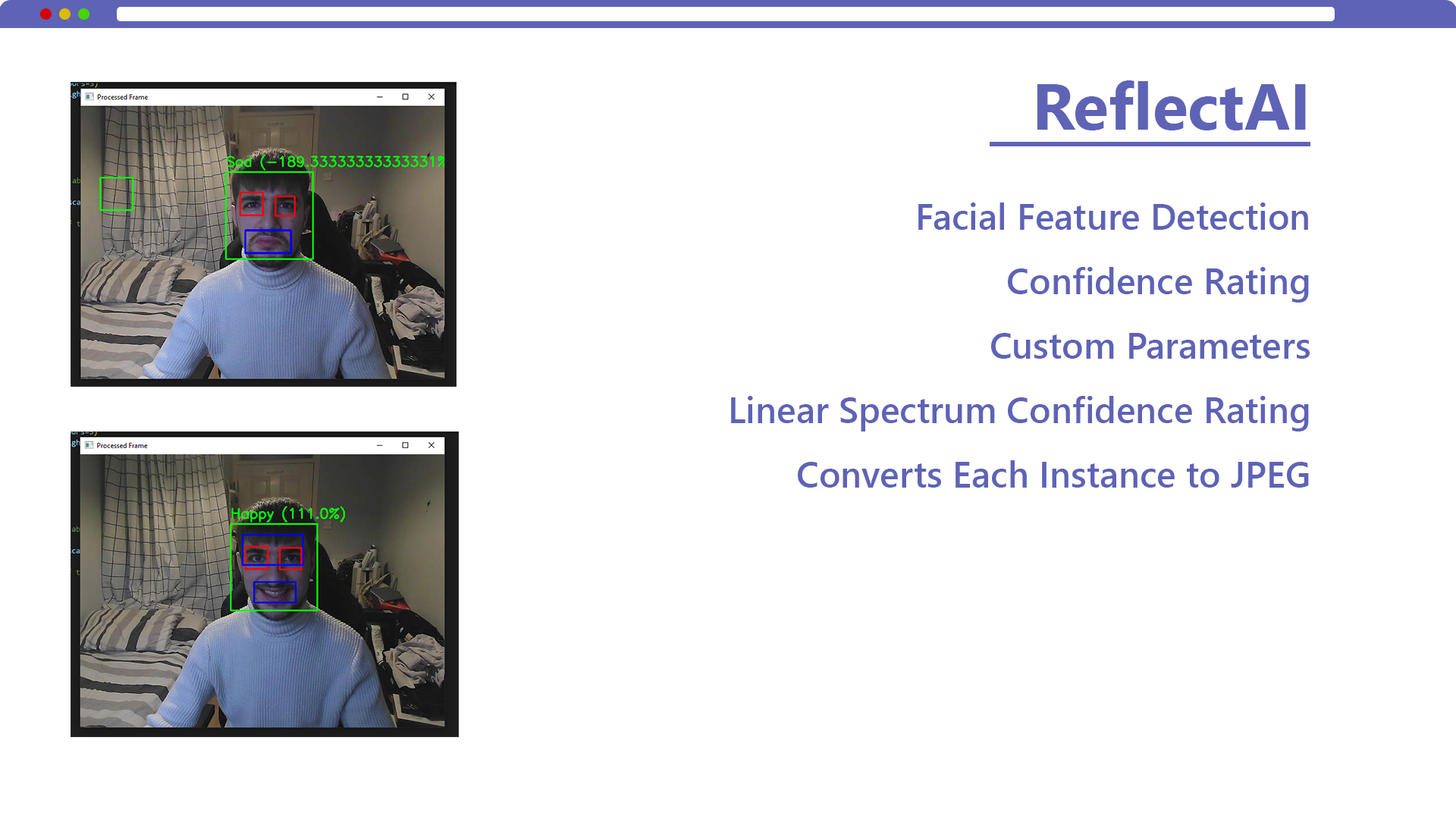
<style>
.page{position:relative;width:1456px;height:819px;background:#ffffff}
.page>*{position:absolute;margin:0}
.t1{font:65.2px "SegoeUI-Bold";color:#5e63b6}
.t2{font:36.4px/64.5px "SegoeUI-Semibold";color:#5e63b6}
</style>
<div class="page">
<p class="t1" style="left:1037px;top:80px;width:269px;height:50px">ReflectAI</p>
<p class="t2" style="left:731px;top:202px;width:579px;height:286px;text-align:right">Facial Feature Detection<br>Confidence Rating<br>Custom Parameters<br>Linear Spectrum Confidence Rating<br>Converts Each Instance to JPEG</p>
</div>
